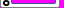
<style>
.page{position:relative;width:64px;height:8px;background:#ffffff}
.page>*{position:absolute;margin:0}
.t1{font:7.7px "Arial-Black";letter-spacing:-0.01em;color:#101010;scale:1.18 1}
</style>
<div class="page">
<p class="t1" style="left:2px;top:0px;width:8px;height:6px">O</p>
</div>
